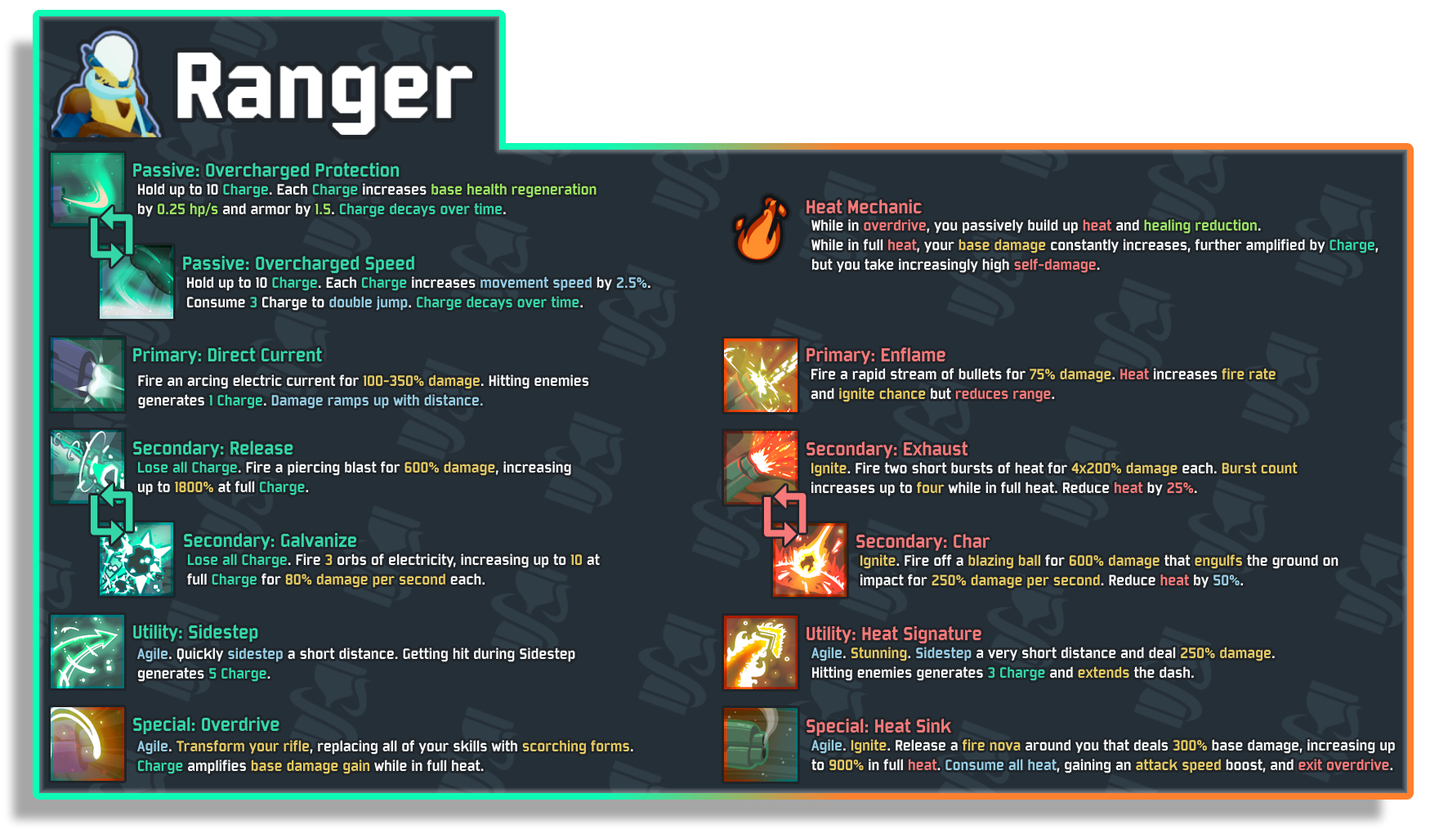
<style>
.page{position:relative;width:1439px;height:829px;background:#252f38}
.page>*{position:absolute;margin:0}
.t1{font:20.4px "Bombardier";color:#35d7a9}
.t2{font:16.3px "Bombardier";color:#9ce562}
.t3{font:16.3px "Bombardier";color:#f7f7f7}
.t4{font:16.3px "Bombardier";color:#35d7a9}
.t5{font:20.4px "Bombardier";color:#f87979}
.t6{font:16.3px "Bombardier";color:#f87979}
.t7{font:16.3px "Bombardier";color:#e5c962}
.t8{font:16.3px "Bombardier";color:#95cde5}
</style>
<div class="page">
<p class="t1" style="left:133px;top:163px;width:267px;height:17px">Passive: Overcharged Protection</p>
<p class="t2" style="left:138px;top:183px;width:459px;height:34px"><span class="t3">Hold up to 10 </span><span class="t4">Charge</span><span class="t3">. Each </span><span class="t4">Charge</span><span class="t3"> increases </span>base health regeneration <br><span class="t3">by </span>0.25 hp/s<span class="t3"> and armor by </span>1.5<span class="t3">. </span><span class="t4">Charge decays over time</span><span class="t3">.</span></p>
<p class="t5" style="left:807px;top:199px;width:115px;height:14px">Heat Mechanic</p>
<p class="t3" style="left:811px;top:219px;width:568px;height:54px">While in <span class="t6">overdrive</span>, you passively build up <span class="t6">heat</span> and <span class="t2">healing reduction</span>. <br>While in full <span class="t6">heat</span>, your <span class="t7">base damage </span>constantly increases, further amplified by <span class="t4">Charge</span>, <br>but you take increasingly high <span class="t6">self-damage</span>.</p>
<p class="t1" style="left:183px;top:256px;width:231px;height:17px">Passive: Overcharged Speed</p>
<p class="t4" style="left:187px;top:276px;width:463px;height:35px"><span class="t3">Hold up to 10 </span>Charge<span class="t3">. Each </span>Charge<span class="t3"> increases </span><span class="t8">movement speed</span><span class="t3"> by </span><span class="t8">2.5%</span><span class="t3">.<br>Consume </span>3<span class="t3"> Charge to </span><span class="t8">double jump</span><span class="t3">. </span>Charge decays over time<span class="t3">.</span></p>
<p class="t1" style="left:133px;top:347px;width:189px;height:17px">Primary: Direct Current</p>
<p class="t5" style="left:807px;top:347px;width:138px;height:17px">Primary: Enflame</p>
<p class="t3" style="left:138px;top:374px;width:451px;height:35px">Fire an arcing electric current for <span class="t7">100-350% damage</span>. Hitting enemies <br>generates <span class="t4">1 Charge</span>. <span class="t8">Damage ramps up with distance.</span></p>
<p class="t3" style="left:811px;top:368px;width:465px;height:34px">Fire a rapid stream of bullets for <span class="t7">75% damage</span>. <span class="t6">Heat</span> increases<span class="t7"> fire rate <br></span>and <span class="t7">ignite chance </span>but <span class="t6">reduces range</span>.</p>
<p class="t1" style="left:133px;top:440px;width:160px;height:18px">Secondary: Release</p>
<p class="t5" style="left:807px;top:441px;width:161px;height:17px">Secondary: Exhaust</p>
<p class="t3" style="left:138px;top:461px;width:433px;height:34px"><span class="t4">Lose all Charge</span>. Fire a piercing blast for <span class="t7">600% damage</span>, increasing <br>up to <span class="t7">1800%</span> at full <span class="t4">Charge</span>.</p>
<p class="t3" style="left:811px;top:462px;width:487px;height:34px"><span class="t7">Ignite</span>. Fire two short bursts of heat for <span class="t7">4x200% damage</span> each. <span class="t7">Burst count <br></span>increases up to <span class="t7">four</span> while in full heat. Reduce <span class="t6">heat</span> by<span class="t6"> 25%</span>.</p>
<p class="t1" style="left:184px;top:533px;width:172px;height:17px">Secondary: Galvanize</p>
<p class="t5" style="left:856px;top:534px;width:134px;height:17px">Secondary: Char</p>
<p class="t3" style="left:187px;top:553px;width:413px;height:35px"><span class="t4">Lose all Charge</span>. Fire <span class="t7">3</span> orbs of electricity, increasing up to <span class="t7">10</span> at <br>full <span class="t4">Charge</span> for <span class="t7">80% damage per second</span> each.</p>
<p class="t3" style="left:860px;top:554px;width:479px;height:34px"><span class="t7">Ignite</span>. Fire off a <span class="t7">blazing ball</span> for <span class="t7">600% damage</span> that <span class="t7">engulfs</span> the ground on <br>impact for <span class="t7">250% damage per second</span>. Reduce <span class="t6">heat</span> by <span class="t8">50%</span>.</p>
<p class="t1" style="left:133px;top:624px;width:125px;height:17px">Utility: Sidestep</p>
<p class="t5" style="left:807px;top:626px;width:174px;height:17px">Utility: Heat Signature</p>
<p class="t3" style="left:137px;top:647px;width:438px;height:35px"><span class="t8">Agile</span>. Quickly <span class="t8">sidestep</span> a short distance. Getting hit during Sidestep <br>generates <span class="t4">5 Charge</span>.</p>
<p class="t3" style="left:811px;top:646px;width:464px;height:35px"><span class="t8">Agile</span>. <span class="t7">Stunning</span>. <span class="t8">Sidestep</span> a very short distance and deal <span class="t7">250% damage</span>. <br>Hitting enemies generates <span class="t4">3 Charge</span> and <span class="t7">extends</span> the dash.</p>
<p class="t1" style="left:133px;top:717px;width:146px;height:17px">Special: Overdrive</p>
<p class="t5" style="left:807px;top:718px;width:145px;height:17px">Special: Heat Sink</p>
<p class="t3" style="left:137px;top:740px;width:496px;height:34px"><span class="t8">Agile</span>. <span class="t7">Transform your rifle</span>, replacing all of your skills with <span class="t7">scorching forms</span>. <br><span class="t4">Charge</span> amplifies <span class="t7">base damage gain</span> while in full heat.</p>
<p class="t3" style="left:811px;top:739px;width:584px;height:34px"><span class="t8">Agile</span>. <span class="t7">Ignite</span>. Release a <span class="t7">fire nova</span> around you that deals <span class="t7">300%</span> base damage, increasing up <br>to <span class="t7">900%</span> in full <span class="t6">heat</span>. <span class="t8">Consume all heat</span>, gaining an <span class="t7">attack speed </span>boost, and <span class="t6">exit overdrive</span>.</p>
</div>
